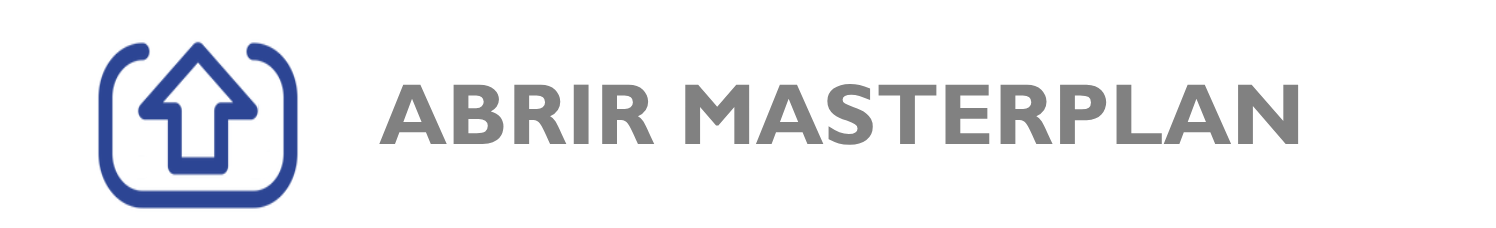
<style>
.page{position:relative;width:1496px;height:228px;background:#ffffff}
.page>*{position:absolute;margin:0}
.t1{font:87px "GillSans-Bold";color:#818181}
</style>
<div class="page">
<p class="t1" style="left:379px;top:83px;width:920px;height:62px">ABRIR MASTERPLAN</p>
</div>
